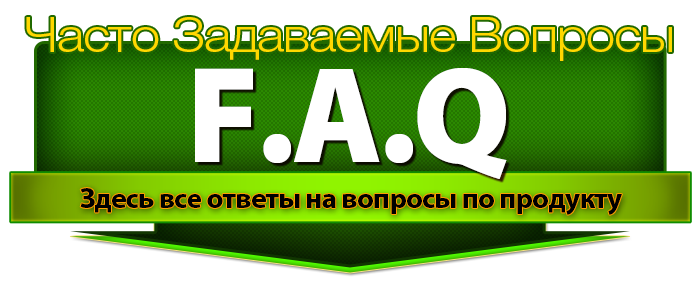
<style>
.page{position:relative;width:700px;height:300px;background:#ffffff}
.page>*{position:absolute;margin:0}
.t1{font:48px "Helvetica-4-Light";letter-spacing:-0.025em;color:#ffd800;scale:1.1 1}
.t2{font:138.2px "MyriadPro-Black";letter-spacing:-0.025em;color:#ffffff;scale:0.97 1}
.t3{font:29.3px "MyriadPro-Bold";letter-spacing:-0.025em;color:#000000}
</style>
<div class="page">
<p class="t1" style="left:26px;top:17px;width:646px;height:44px">Часто Задаваемые Вопросы</p>
<p class="t2" style="left:195px;top:68px;width:312px;height:111px">F.A.Q</p>
<p class="t3" style="left:80px;top:188px;width:542px;height:27px">Здесь все ответы на вопросы по продукту</p>
</div>
